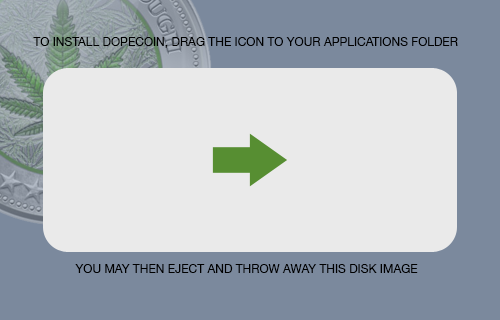
<style>
.page{position:relative;width:500px;height:320px;background:#eaeaea}
.page>*{position:absolute;margin:0}
.t1{font:12px "HelveticaNeue";color:#000000;text-transform:uppercase}
</style>
<div class="page">
<p class="t1" style="left:33px;top:37px;width:425px;height:11px">To install DOPECOIN, drag the icon to your Applications folder</p>
<p class="t1" style="left:75px;top:264px;width:343px;height:9px">You may then Eject and throw away this disk image</p>
</div>
